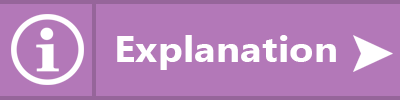
<style>
.page{position:relative;width:400px;height:100px;background:#b378b8}
.page>*{position:absolute;margin:0}
.t1{font:36.1px "SegoeUI-Bold";color:#ffffff;scale:1.12 1}
</style>
<div class="page">
<p class="t1" style="left:117px;top:35px;width:219px;height:35px">Explanation</p>
</div>
